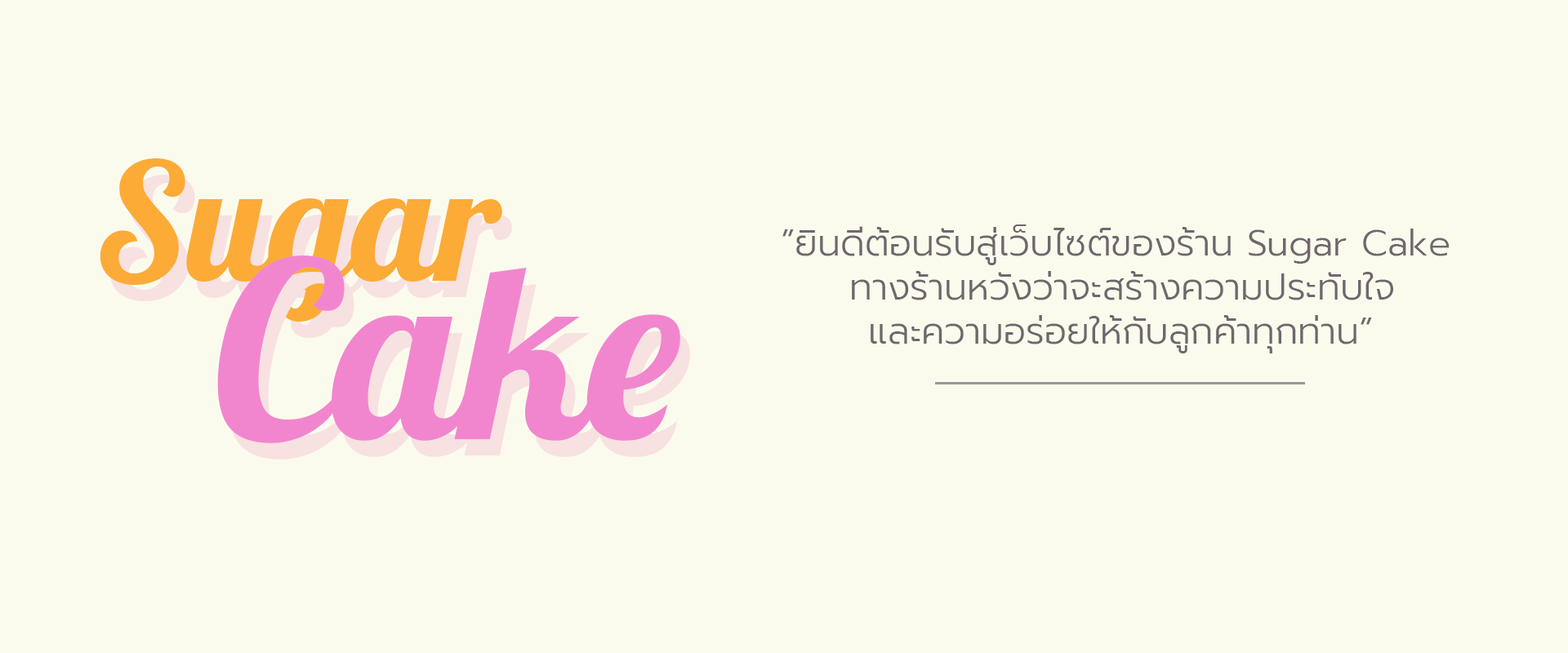
<style>
.page{position:relative;width:1568px;height:653px;background:#fbfbed}
.page>*{position:absolute;margin:0}
.t1{font:163.3px "Lobster-Regular";color:#fcab37}
.t2{font:36.8px "Prompt-Light";color:#6f676d}
.t3{font:245px "Lobster-Regular";color:#f186cf}
</style>
<div class="page">
<p class="t1" style="left:100px;top:158px;width:402px;height:164px">Sugar</p>
<p class="t2" style="left:782px;top:225px;width:668px;height:129px;text-align:center">ย”ยินดีต้อนรับสู่เว็บไซต์ของร้าน Sugar Cake <br>ททางร้านหวังว่าจะสร้างความประทับใจ<br>แและความอร่อยให้กับลูกค้าทุกท่าน”</p>
<p class="t3" style="left:217px;top:256px;width:463px;height:187px">Cake</p>
</div>
